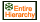
<style>
.page{position:relative;width:40px;height:22px;background:#ffffff}
.page>*{position:absolute;margin:0}
.t1{font:7px "ArialMT";color:#fc6b03}
</style>
<div class="page">
<p class="t1" style="left:14px;top:5px;width:18px;height:8px">Entire</p>
<p class="t1" style="left:5px;top:11px;width:30px;height:8px">Hierarchy</p>
</div>
